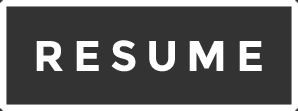
<style>
.page{position:relative;width:298px;height:111px;background:#333333}
.page>*{position:absolute;margin:0}
.t1{font:42.9px "Montserrat-Bold";letter-spacing:0.2em;color:#ffffff;text-transform:uppercase}
</style>
<div class="page">
<p class="t1" style="left:36px;top:40px;width:226px;height:32px">RESUME</p>
</div>
